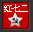
<style>
.page{position:relative;width:33px;height:32px;background:#c50000}
.page>*{position:absolute;margin:0}
.t1{font:10.4px "SimSun";letter-spacing:-0.25em;color:#ffffff}
</style>
<div class="page">
<p class="t1" style="left:4px;top:4px;width:24px;height:8px">红七二</p>
</div>
